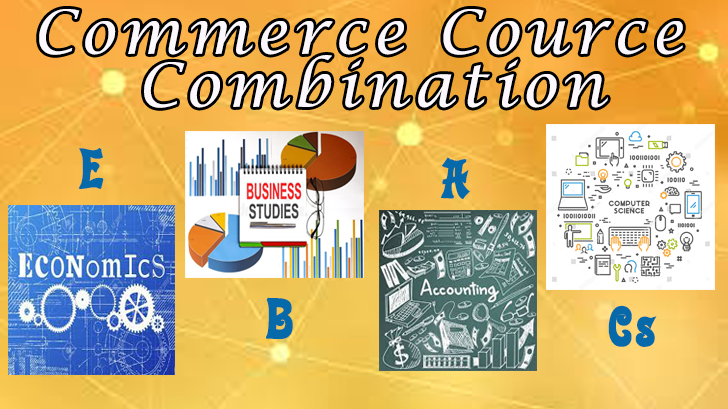
<style>
.page{position:relative;width:728px;height:409px}
.page>*{position:absolute;margin:0}
.t1{font:60px/53px "LucidaCalligraphy-Italic";letter-spacing:0.1em;color:#fbf7fd}
.t2{font:48px "Alibi";letter-spacing:0.1em;color:#066aaa}
</style>
<div class="page">
<p class="t1" style="left:39px;top:9px;width:644px;height:99px;text-align:center">Commerce Cource <br>Combination</p>
<p class="t2" style="left:78px;top:148px;width:26px;height:41px">E</p>
<p class="t2" style="left:441px;top:157px;width:29px;height:43px">A</p>
<p class="t2" style="left:266px;top:297px;width:27px;height:42px">B</p>
<p class="t2" style="left:608px;top:305px;width:49px;height:42px">Cs</p>
</div>
